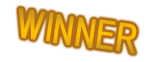
<style>
.page{position:relative;width:160px;height:62px;background:#ffffff}
.page>*{position:absolute;margin:0}
.t1{font:36px "HGSGothicE";color:#f4b808}
</style>
<div class="page">
<p class="t1" style="left:19px;top:8px;width:118px;height:46px;rotate:8deg">WINNER</p>
</div>
